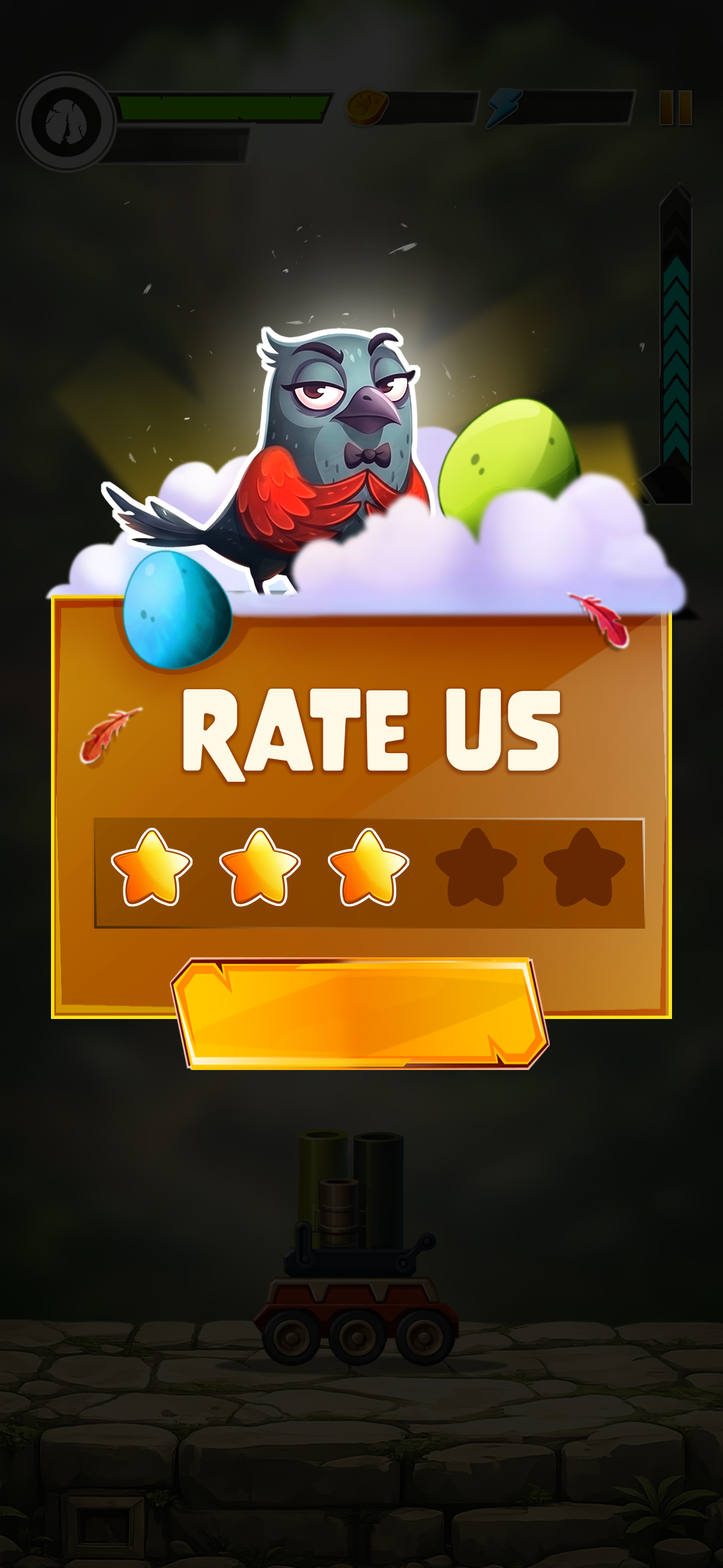
<style>
.page{position:relative;width:723px;height:1568px}
.page>*{position:absolute;margin:0}
.t1{font:102.4px "Nove";color:#fff9e5}
</style>
<div class="page">
<p class="t1" style="left:183px;top:689px;width:377px;height:93px">rate us</p>
</div>
